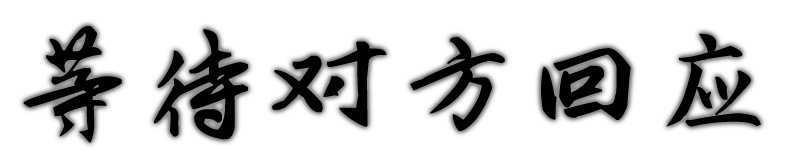
<style>
.page{position:relative;width:787px;height:165px;background:#ffffff}
.page>*{position:absolute;margin:0}
.t1{font:119.4px "SentyZHAO";color:#020000}
</style>
<div class="page">
<p class="t1" style="left:23px;top:26px;width:738px;height:117px">等待对方回应</p>
</div>
